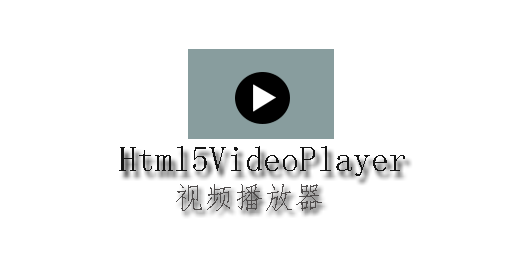
<style>
.page{position:relative;width:512px;height:256px;background:#ffffff}
.page>*{position:absolute;margin:0}
.t1{font:36px "·ÂËÎ";color:#000000}
.t2{font:29.7px "·ÂËÎ";color:#504d4d}
</style>
<div class="page">
<p class="t1" style="left:119px;top:146px;width:286px;height:30px">Html5VideoPlayer</p>
<p class="t2" style="left:176px;top:184px;width:146px;height:27px">视频播放器</p>
</div>
